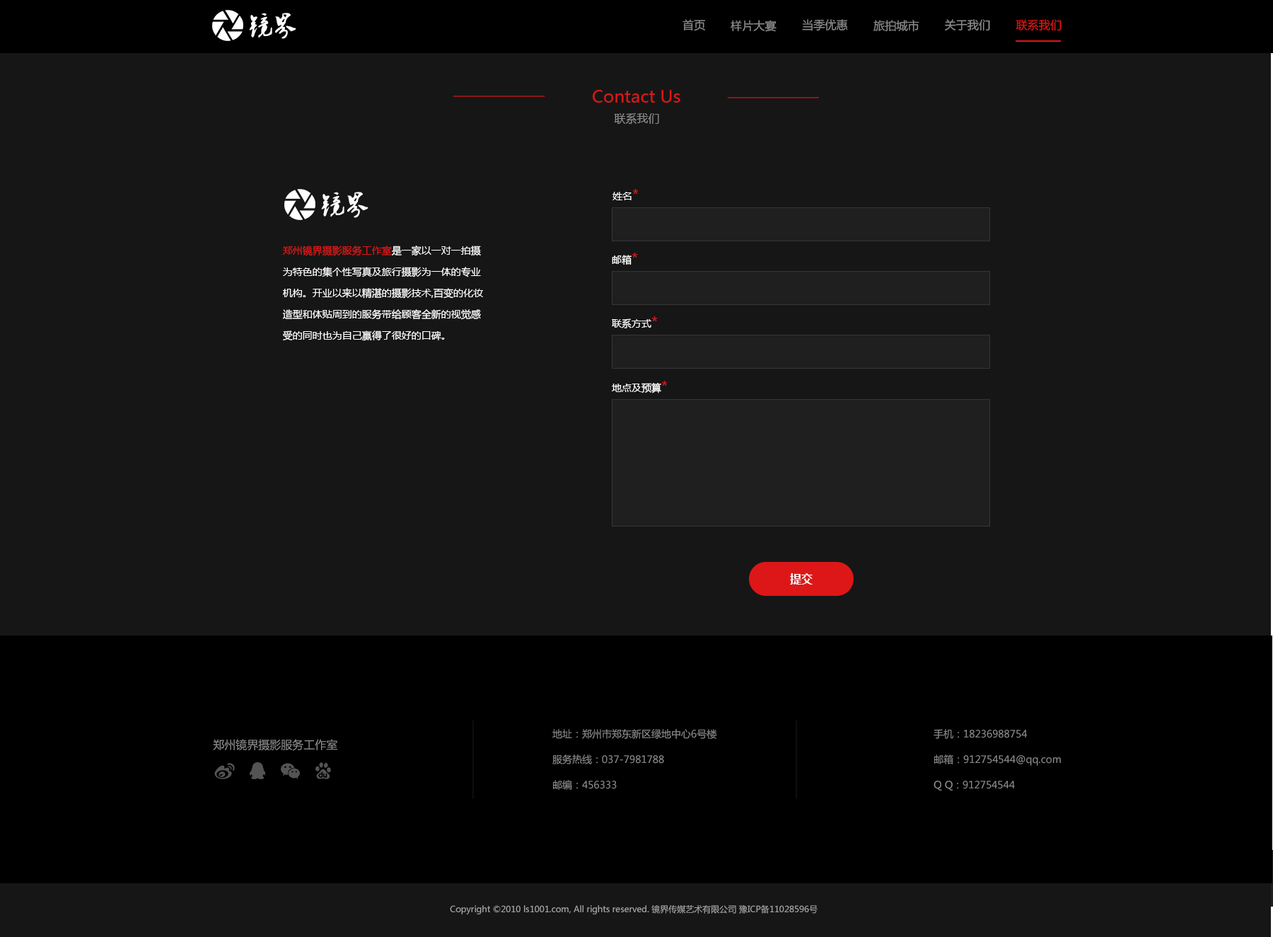
<style>
.page{position:relative;width:1273px;height:937px;background:#161616}
.page>*{position:absolute;margin:0}
.t1{font:25.1px "2.0-";color:#ffffff}
.t2{font:11.3px "MicrosoftYaHei";color:#8d8d8d}
.t3{font:11.5px "MicrosoftYaHei";color:#8d8d8d}
.t4{font:11.5px "MicrosoftYaHei";color:#dd1717}
.t5{font:17px "MicrosoftYaHei";color:#dd1717}
.t6{font:11.3px "MicrosoftYaHei";color:#8c8c8c}
.t7{font:9.9px "MicrosoftYaHei";color:#ffffff}
.t8{font:14.1px "MicrosoftYaHei";color:#dd1717}
.t9{font:9.9px/21.2px "MicrosoftYaHei";color:#ffffff}
.t10{font:9.9px/21.2px "MicrosoftYaHei";color:#dd1717}
.t11{font:11.3px "MicrosoftYaHei-Bold";letter-spacing:0.015em;color:#fefefe}
.t12{font:9.9px/25.5px "MicrosoftYaHei";color:#8c8c8c}
.t13{font:8.5px "MicrosoftYaHei";color:#a7a7a7}
</style>
<div class="page">
<p class="t1" style="left:249px;top:13px;width:47px;height:26px">镜界</p>
<p class="t2" style="left:683px;top:19px;width:22px;height:12px">首页</p>
<p class="t2" style="left:731px;top:20px;width:46px;height:12px">样片大宴</p>
<p class="t3" style="left:802px;top:19px;width:46px;height:12px">当季优惠</p>
<p class="t3" style="left:874px;top:20px;width:46px;height:12px">旅拍城市</p>
<p class="t3" style="left:945px;top:19px;width:45px;height:12px">关于我们</p>
<p class="t4" style="left:1016px;top:19px;width:46px;height:12px">联系我们</p>
<p class="t5" style="left:593px;top:90px;width:87px;height:13px">Contact Us</p>
<p class="t6" style="left:614px;top:113px;width:45px;height:11px">联系我们</p>
<p class="t1" style="left:321px;top:192px;width:48px;height:26px">镜界</p>
<p class="t7" style="left:613px;top:189px;width:26px;height:11px">姓名<span class="t8">*</span></p>
<p class="t9" style="left:282px;top:245px;width:201px;height:96px"><span class="t10">郑州镜界摄影服务工作室</span>是一家以一对一拍摄<br>为特色的集个性写真及旅行摄影为一体的专业<br>机构。开业以来以精湛的摄影技术,百变的化妆<br>造型和体贴周到的服务带给顾客全新的视觉感<br>受的同时也为自己赢得了很好的口碑。</p>
<p class="t7" style="left:612px;top:253px;width:26px;height:12px">邮箱<span class="t8">*</span></p>
<p class="t7" style="left:612px;top:316px;width:46px;height:12px">联系方式<span class="t8">*</span></p>
<p class="t7" style="left:612px;top:381px;width:56px;height:12px">地点及预算<span class="t8">*</span></p>
<p class="t11" style="left:790px;top:573px;width:23px;height:11px">提交</p>
<p class="t12" style="left:552px;top:729px;width:165px;height:60px">地址：郑州市郑东新区绿地中心6号楼<br>服务热线：037-7981788<br>邮编：456333</p>
<p class="t12" style="left:934px;top:729px;width:127px;height:61px">手机：18236988754<br>邮箱：912754544@qq.com<br>Q Q：912754544</p>
<p class="t6" style="left:213px;top:738px;width:124px;height:13px">郑州镜界摄影服务工作室</p>
<p class="t13" style="left:450px;top:904px;width:368px;height:10px">Copyright ©2010 ls1001.com, All rights reserved. 镜界传媒艺术有限公司 豫ICP备11028596号</p>
</div>
